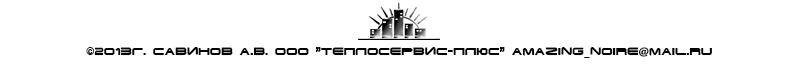
<style>
.page{position:relative;width:800px;height:70px;background:#ffffff}
.page>*{position:absolute;margin:0}
.t1{font:10px "TerminatorCyr4-Semi-expandedBold";color:#000000}
</style>
<div class="page">
<p class="t1" style="left:86px;top:47px;width:626px;height:11px">©2013г. Савинов А.В. ООО "Теплосервис-плюс" amazing_noire@mail.ru</p>
</div>
